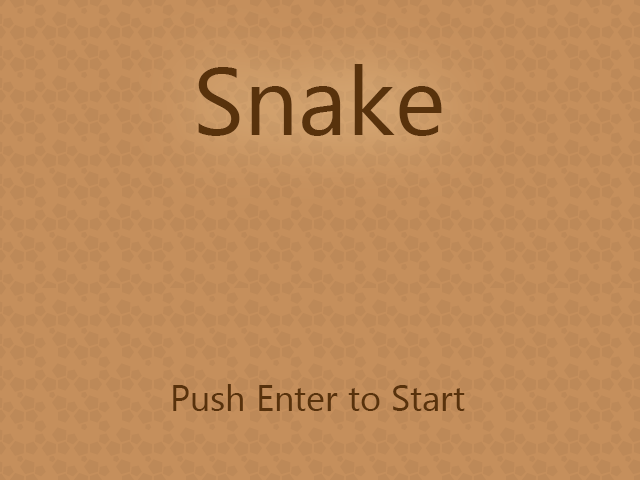
<style>
.page{position:relative;width:640px;height:480px;background:#c58f5c}
.page>*{position:absolute;margin:0}
.t1{font:96px "LaoUI";color:#58320c}
.t2{font:36px "LaoUI";color:#58320c}
</style>
<div class="page">
<p class="t1" style="left:198px;top:64px;width:244px;height:72px">Snake</p>
<p class="t2" style="left:173px;top:384px;width:292px;height:27px">Push Enter to Start</p>
</div>
